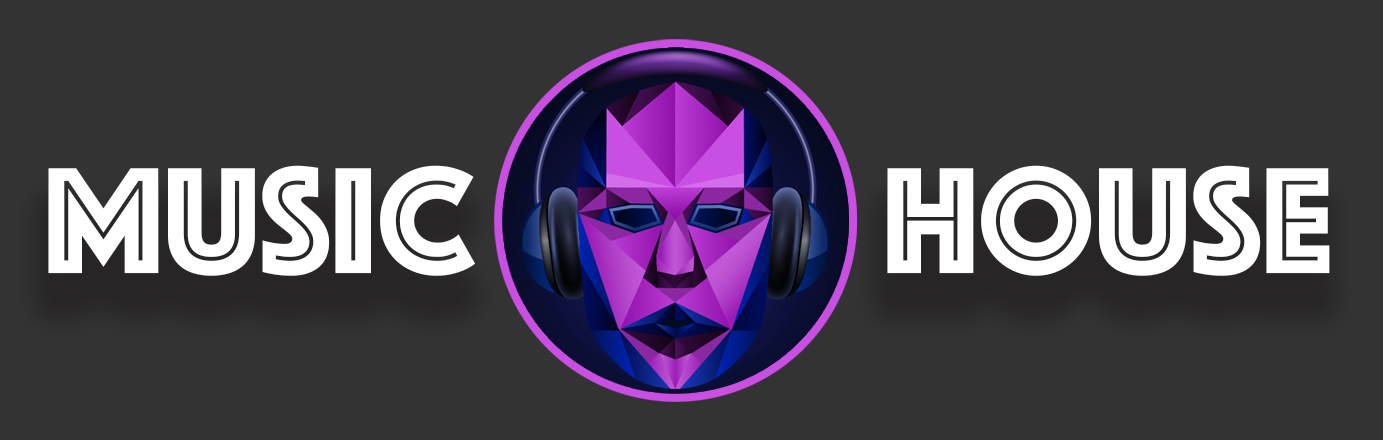
<style>
.page{position:relative;width:1383px;height:440px;background:#333333}
.page>*{position:absolute;margin:0}
.t1{font:156.8px "Phosphate-Inline";color:#ffffff;text-transform:uppercase}
</style>
<div class="page">
<p class="t1" style="left:48px;top:165px;width:427px;height:111px">music</p>
<p class="t1" style="left:887px;top:165px;width:443px;height:111px">house</p>
</div>
